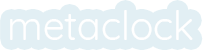
<style>
.page{position:relative;width:203px;height:50px;background:#e2eff4}
.page>*{position:absolute;margin:0}
.t1{font:39px "Quicksand-Regular";color:#ffffff}
</style>
<div class="page">
<p class="t1" style="left:10px;top:10px;width:183px;height:30px">metaclock</p>
</div>
